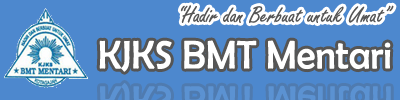
<style>
.page{position:relative;width:400px;height:100px;background:#4d88ce}
.page>*{position:absolute;margin:0}
.t1{font:24.4px "FreestyleScript-Regular";color:#555555}
.t2{font:40.3px "BerlinSansFB-Reg";color:#ffffff;scale:0.96 1}
</style>
<div class="page">
<p class="t1" style="left:180px;top:5px;width:214px;height:19px">“Hadir dan Berbuat untuk Umat”</p>
<p class="t2" style="left:99px;top:40px;width:292px;height:32px">KJKS BMT Mentari</p>
</div>
